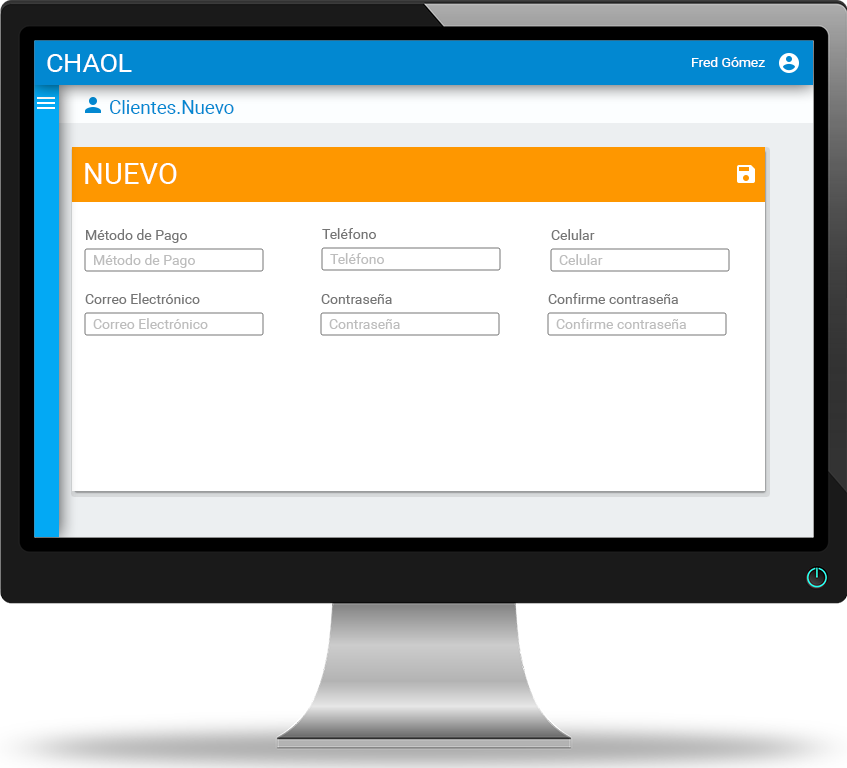
<style>
.page{position:relative;width:847px;height:768px;background:#ffffff}
.page>*{position:absolute;margin:0}
.t1{font:25.7px "Roboto-Regular";color:#ffffff}
.t2{font:13.3px "Roboto-Regular";color:#ffffff;scale:1.04 1}
.t3{font:18.6px "Roboto-Regular";color:#0288d1}
.t4{font:29.1px "Roboto-Regular";color:#ffffff}
.t5{font:14px "Roboto-Regular";color:#757575}
.t6{font:14px "Roboto-Regular";color:#bdbdbd}
</style>
<div class="page">
<p class="t1" style="left:47px;top:54px;width:85px;height:18px">CHAOL</p>
<p class="t2" style="left:692px;top:57px;width:73px;height:10px">Fred Gómez</p>
<p class="t3" style="left:110px;top:100px;width:124px;height:14px">Clientes.Nuevo</p>
<p class="t4" style="left:85px;top:163px;width:92px;height:21px">NUEVO</p>
<p class="t5" style="left:86px;top:229px;width:101px;height:14px">Método de Pago</p>
<p class="t5" style="left:322px;top:228px;width:54px;height:11px">Teléfono</p>
<p class="t5" style="left:551px;top:229px;width:44px;height:11px">Celular</p>
<p class="t6" style="left:94px;top:254px;width:101px;height:14px">Método de Pago</p>
<p class="t6" style="left:330px;top:253px;width:54px;height:11px">Teléfono</p>
<p class="t6" style="left:559px;top:254px;width:44px;height:11px">Celular</p>
<p class="t5" style="left:85px;top:293px;width:115px;height:11px">Correo Electrónico</p>
<p class="t5" style="left:321px;top:294px;width:71px;height:10px">Contraseña</p>
<p class="t5" style="left:548px;top:293px;width:130px;height:11px">Confirme contraseña</p>
<p class="t6" style="left:93px;top:318px;width:115px;height:11px">Correo Electrónico</p>
<p class="t6" style="left:556px;top:318px;width:130px;height:11px">Confirme contraseña</p>
<p class="t6" style="left:329px;top:319px;width:71px;height:10px">Contraseña</p>
</div>
